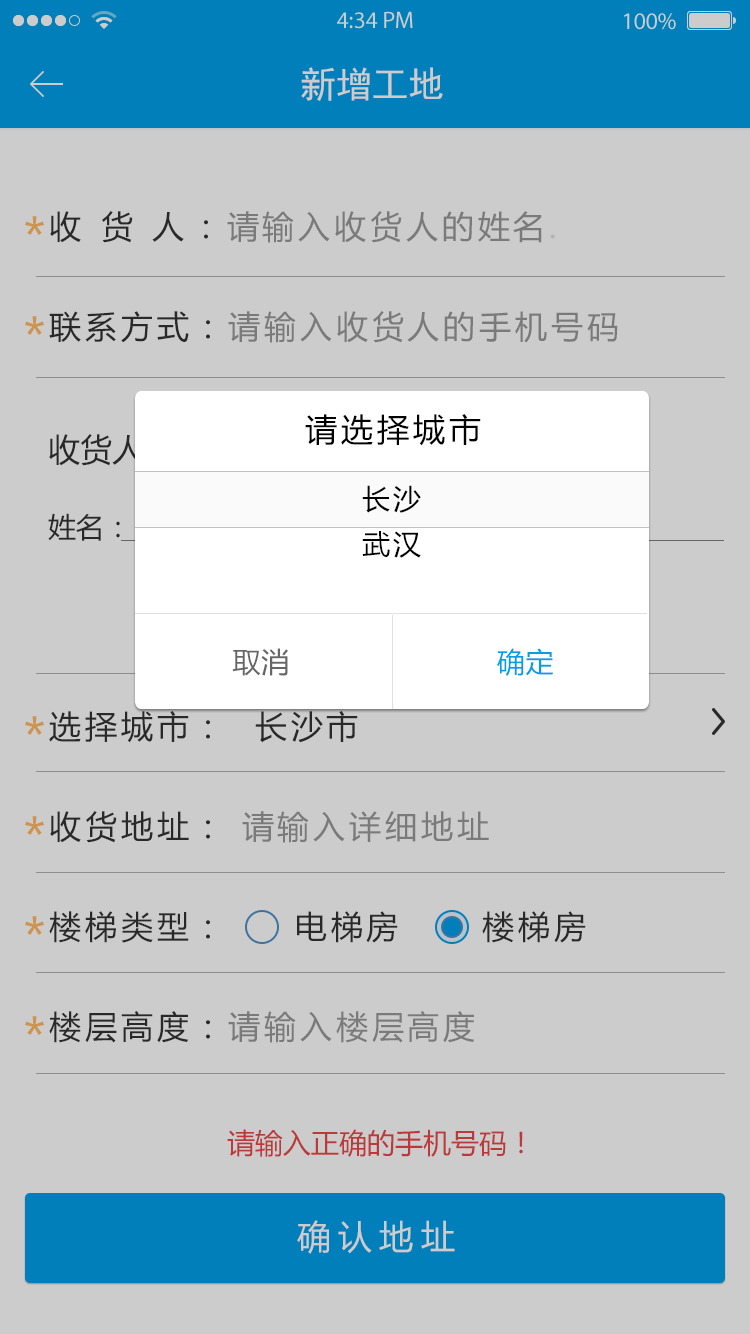
<style>
.page{position:relative;width:750px;height:1334px;background:#cccccc}
.page>*{position:absolute;margin:0}
.t1{font:36px "SimHei";color:#cccccc}
.t2{font:50px/100px "MicrosoftYaHei";letter-spacing:0.12em;color:#cc944f}
.t3{font:32px/100px "MicrosoftYaHei";letter-spacing:0.12em}
.t4{font:32px/100px "MicrosoftYaHei";letter-spacing:0.16em}
.t5{font:32px "MicrosoftYaHei";letter-spacing:0.12em;color:#000000}
.t6{font:28px/80px "MicrosoftYaHei"}
.t7{font:32px/80px "MicrosoftYaHei"}
.t8{font:28px/45px "MicrosoftYaHei";letter-spacing:0.12em;color:#000000}
.t9{font:28px "MicrosoftYaHei";letter-spacing:0.025em;color:#666666}
.t10{font:28px "MicrosoftYaHei";letter-spacing:0.025em;color:#009fe8}
.t11{font:28px "MicrosoftYaHei";color:#bc3939}
.t12{font:34px "MicrosoftYaHei";letter-spacing:0.22em;color:#cccccc}
</style>
<div class="page">
<p class="t1" style="left:301px;top:67px;width:142px;height:34px">新增工地</p>
<p class="t2" style="left:25px;top:216px;width:19px;height:819px">*<br>*<br><br><br><br>*<br>*<br>*<br>*</p>
<p class="t3" style="left:49px;top:211px;width:569px;height:832px"><span class="t4">收 货 人：</span>请输入收货人的姓名.                 <br>联系方式：请输入收货人的手机号码<br><br><br><br>选择城市：  长沙市<br>收货地址： 请输入详细地址<br>楼梯类型：     电梯房      楼梯房<br>楼层高度：请输入楼层高度</p>
<p class="t5" style="left:305px;top:414px;width:176px;height:32px">请选择城市</p>
<p class="t6" style="left:48px;top:434px;width:386px;height:107px"><span class="t7">收货人信息<br></span>姓名：                     联系方式：</p>
<p class="t8" style="left:362px;top:485px;width:59px;height:73px">长沙<br>武汉</p>
<p class="t9" style="left:232px;top:648px;width:322px;height:28px">取消<span class="t10">                       确定</span></p>
<p class="t11" style="left:227px;top:1129px;width:296px;height:28px">请输入正确的手机号码！</p>
<p class="t12" style="left:297px;top:1220px;width:158px;height:34px">确认地址</p>
</div>
